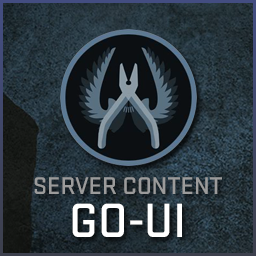
<style>
.page{position:relative;width:256px;height:256px}
.page>*{position:absolute;margin:0}
.t1{font:25px "Stratum2-Medium";color:#9b9b9b}
.t2{font:50px "Stratum2-Medium";color:#ffffff}
</style>
<div class="page">
<p class="t1" style="left:34px;top:177px;width:188px;height:17px">SERVER CONTENT</p>
<p class="t2" style="left:72px;top:203px;width:110px;height:34px">GO-UI</p>
</div>
